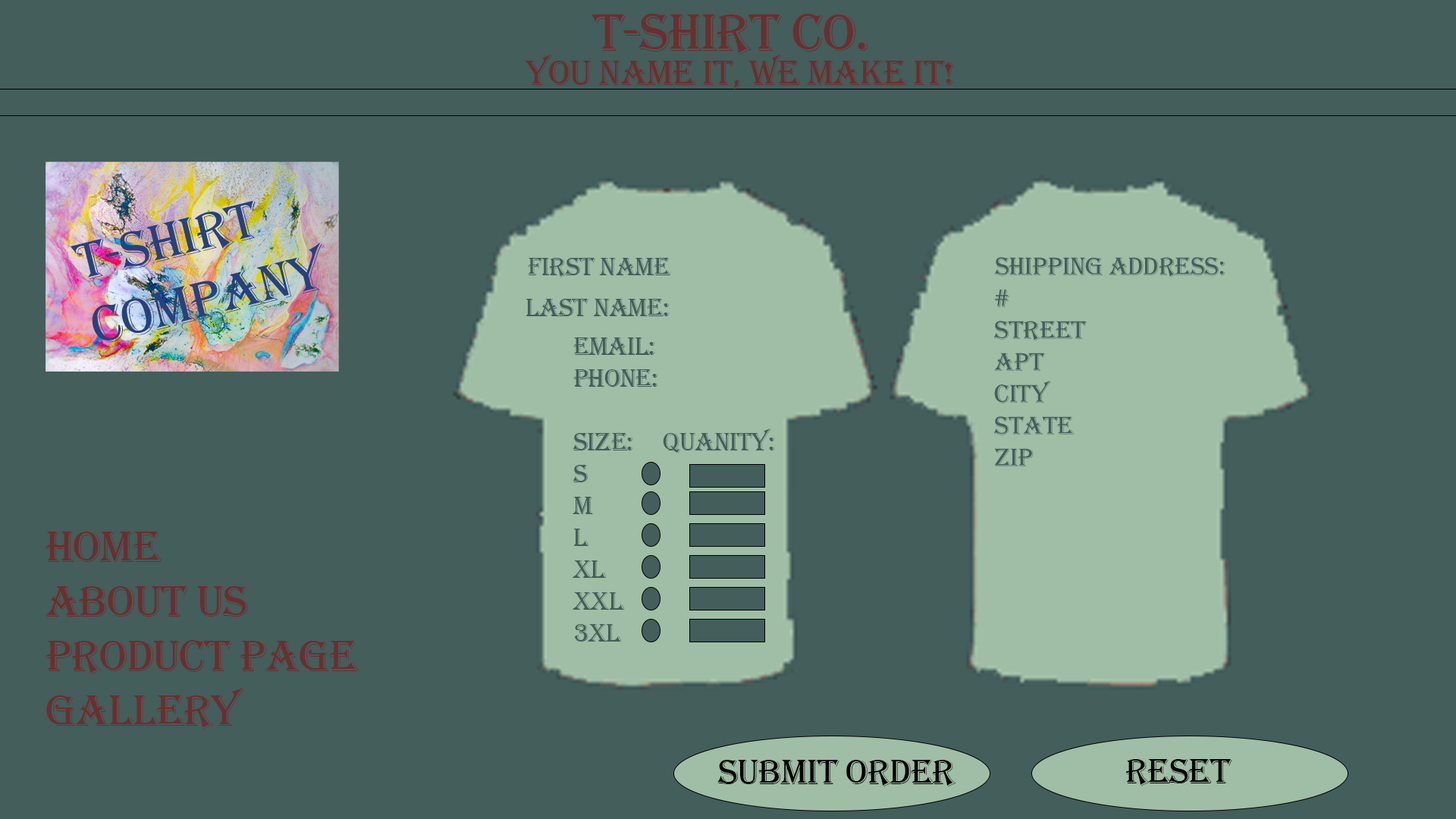
<style>
.page{position:relative;width:1456px;height:819px;background:#435e5b}
.page>*{position:absolute;margin:0}
.t1{font:54.6px "Algerian";letter-spacing:-0.025em;color:#6c2e2e}
.t2{font:36.4px "Algerian";letter-spacing:-0.025em;color:#6c2e2e}
.t3{font:54.6px "Algerian";letter-spacing:-0.025em;color:#244280}
.t4{font:26.5px "Algerian";letter-spacing:-0.025em;color:#435e5b}
.t5{font:45.5px "Algerian";letter-spacing:-0.025em;color:#6c2e2e}
.t6{font:36.4px "Algerian";letter-spacing:-0.025em;color:#000000}
</style>
<div class="page">
<p class="t1" style="left:591px;top:14px;width:277px;height:41px">T-Shirt Co.</p>
<p class="t2" style="left:525px;top:54px;width:430px;height:35px">You Name It, We Make It!</p>
<p class="t3" style="left:71px;top:200px;width:251px;height:143px;rotate:-14deg">T-Shirt <br>Company</p>
<p class="t4" style="left:528px;top:258px;width:142px;height:20px">First Name</p>
<p class="t4" style="left:993px;top:257px;width:232px;height:209px">Shipping Address:<br>#<br>Street<br>Apt<br>City<br>State<br>Zip</p>
<p class="t4" style="left:526px;top:299px;width:143px;height:17px">Last Name:</p>
<p class="t5" style="left:45px;top:532px;width:313px;height:197px">Home<br>About US<br>Product Page<br>Gallery</p>
<p class="t6" style="left:717px;top:760px;width:239px;height:27px">Submit Order</p>
<p class="t6" style="left:1125px;top:759px;width:107px;height:27px">RESET</p>
</div>
